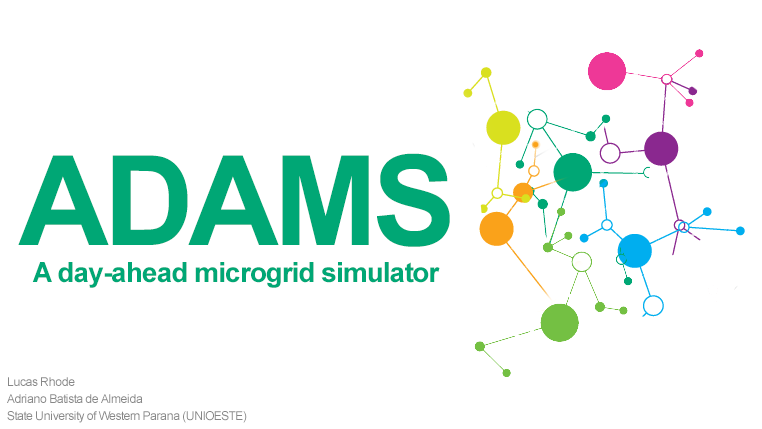
<style>
.page{position:relative;width:762px;height:429px;background:#ffffff}
.page>*{position:absolute;margin:0}
.t1{font:125px "Arial-BoldMT";letter-spacing:-0.04em;color:#00a775}
.t2{font:28px "Arial-BoldMT";letter-spacing:-0.04em;color:#00a775}
.t3{font:12px/17px "ArialMT";letter-spacing:-0.04em;color:#878787}
</style>
<div class="page">
<p class="t1" style="left:18px;top:153px;width:432px;height:94px">ADAMS</p>
<p class="t2" style="left:32px;top:262px;width:408px;height:26px">A day-ahead microgrid simulator</p>
<p class="t3" style="left:7px;top:377px;width:240px;height:46px">Lucas Rhode<br>Adriano Batista de Almeida<br>State University of Western Parana (UNIOESTE)</p>
</div>
